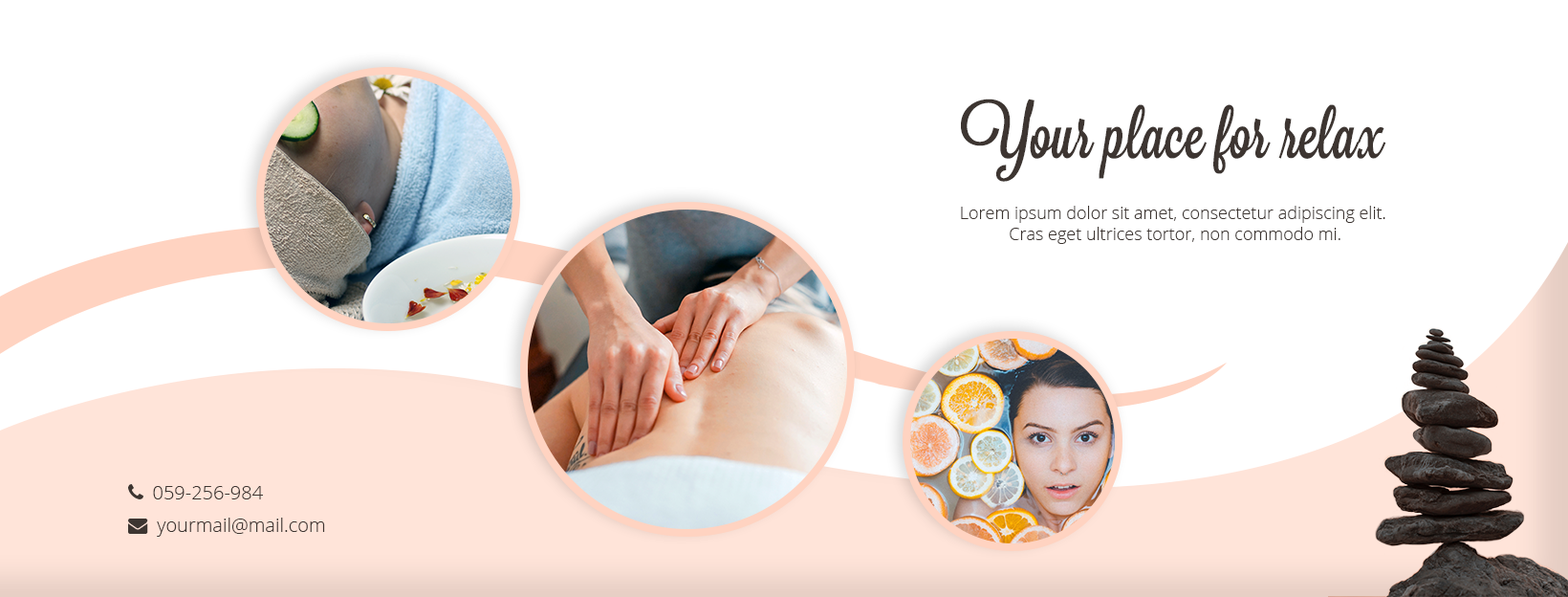
<style>
.page{position:relative;width:1568px;height:597px;background:#ffffff}
.page>*{position:absolute;margin:0}
.t1{font:66.9px "Lavanderia-Sturdy";color:#3d3531}
.t2{font:17.2px "OpenSans-Light";color:#3d3531}
</style>
<div class="page">
<p class="t1" style="left:961px;top:98px;width:425px;height:84px">Your place for relax</p>
<p class="t2" style="left:961px;top:206px;width:424px;height:38px;text-align:center">Lorem ipsum dolor sit amet, consectetur adipiscing elit. <br>Cras eget ultrices tortor, non commodo mi.</p>
</div>
